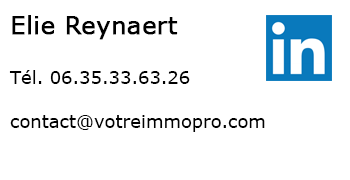
<style>
.page{position:relative;width:350px;height:180px;background:#ffffff}
.page>*{position:absolute;margin:0}
.t1{font:18px "Verdana";color:#000000}
.t2{font:24px "Verdana";color:#000000;font-weight:bold}
</style>
<div class="page">
<p class="t1" style="left:9px;top:15px;width:256px;height:117px"><span class="t2">Elie Reynaert<br><br></span>Tél. 06.35.33.63.26<br><br>contact@votreimmopro.com</p>
</div>
